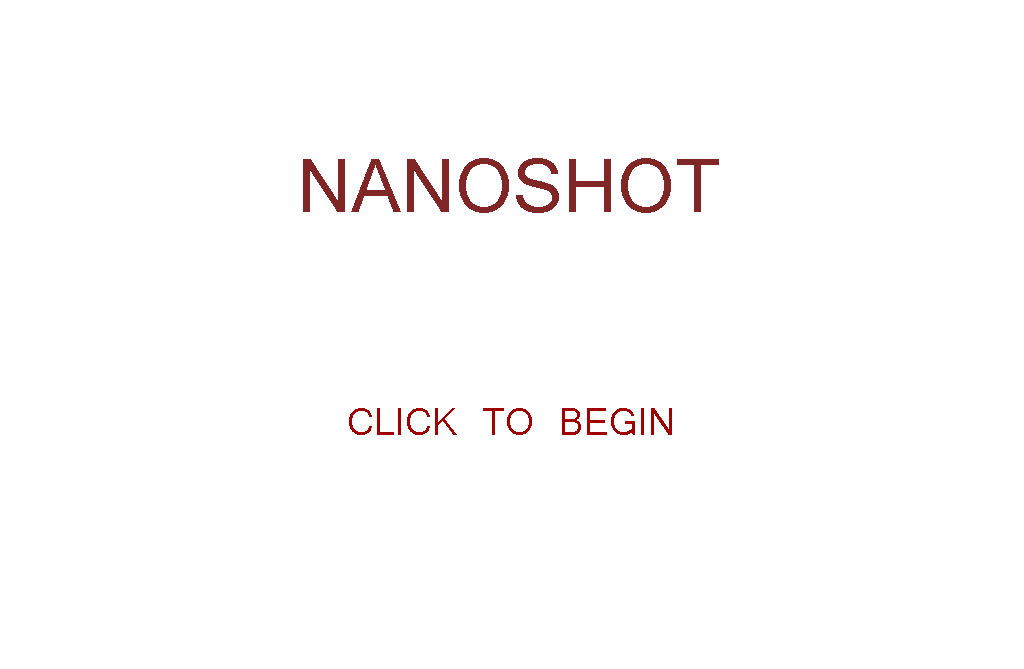
<style>
.page{position:relative;width:1024px;height:669px;background:#ffffff}
.page>*{position:absolute;margin:0}
.t1{font:83.3px "Vrinda";color:#822626}
.t2{font:41.7px "Vrinda";color:#a00000}
</style>
<div class="page">
<p class="t1" style="left:303px;top:158px;width:416px;height:55px">NANOSHOT</p>
<p class="t2" style="left:349px;top:408px;width:323px;height:27px">CLICK TO BEGIN</p>
</div>
